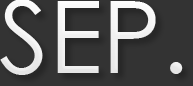
<style>
.page{position:relative;width:193px;height:86px;background:#333333}
.page>*{position:absolute;margin:0}
.t1{font:100px "CenturyGothic";color:#ffffff}
</style>
<div class="page">
<p class="t1" style="left:0px;top:0px;width:183px;height:75px">SEP.</p>
</div>
